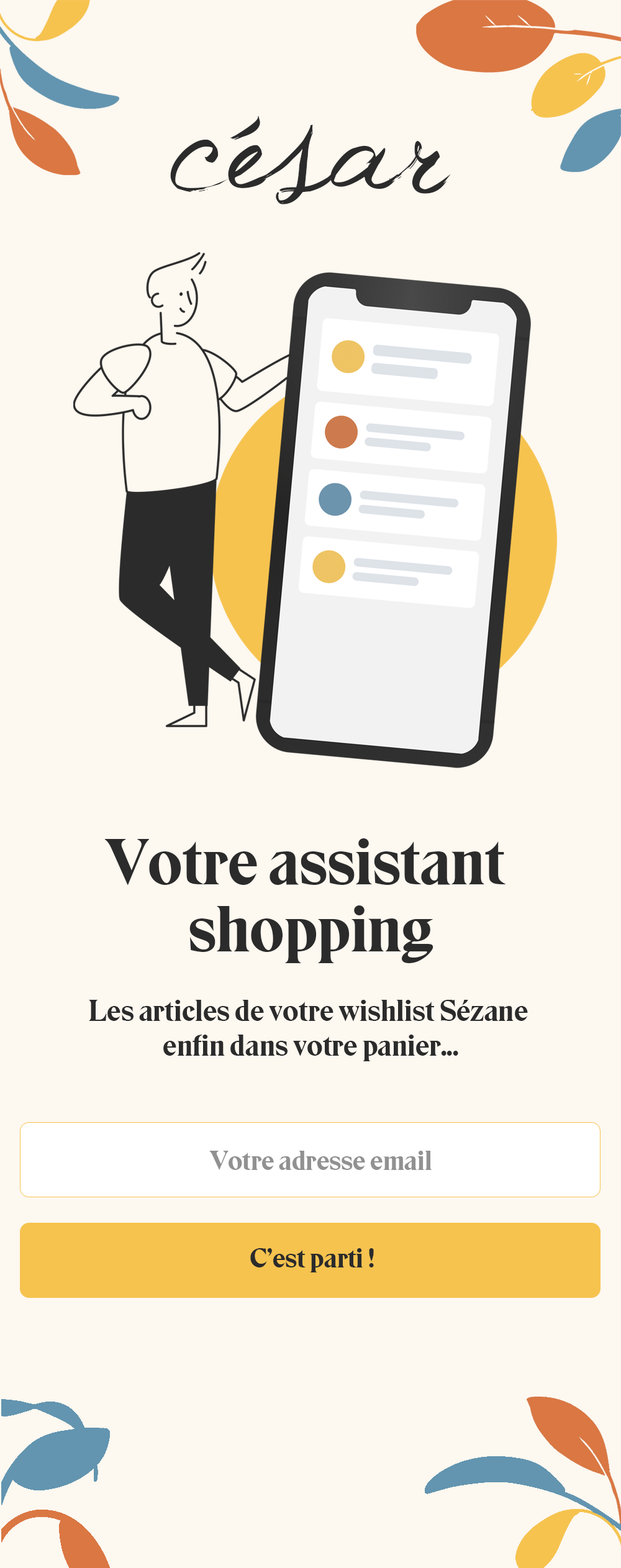
<style>
.page{position:relative;width:621px;height:1568px;background:#fdf8f0}
.page>*{position:absolute;margin:0}
.t1{font:152.8px "Jellyka-Western-Princess";color:#2b2b2b}
.t2{font:29.8px/34.8px "EksellDisplayWeb-Medium";color:#2b2b2b}
.t3{font:64.6px/34.8px "EksellDisplayWeb-Medium";color:#2b2b2b}
.t4{font:64.6px/67.1px "EksellDisplayWeb-Medium";color:#2b2b2b}
.t5{font:27.3px "EksellDisplayWeb-Medium";color:#919191}
.t6{font:27.3px "EksellDisplayWeb-Medium";color:#2b2b2b}
</style>
<div class="page">
<p class="t1" style="left:170px;top:116px;width:281px;height:88px">césar</p>
<p class="t2" style="left:89px;top:838px;width:439px;height:223px;text-align:center"><span class="t3">Votre as</span><span class="t4">sistant <br>shopping<br></span><span class="t3"><br></span>Les articles de votre wishlist Sézane <br>enfin dans votre panier...</p>
<p class="t5" style="left:209px;top:1151px;width:223px;height:19px"><span class="t6"><br></span>    Votre adresse email</p>
<p class="t6" style="left:250px;top:1248px;width:124px;height:24px">C’est parti !</p>
</div>
